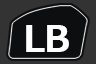
<style>
.page{position:relative;width:96px;height:64px;background:#0c0e0f}
.page>*{position:absolute;margin:0}
.t1{font:36px "Meiryo-Bold";color:#ffffff}
</style>
<div class="page">
<p class="t1" style="left:26px;top:25px;width:43px;height:27px">LB</p>
</div>
